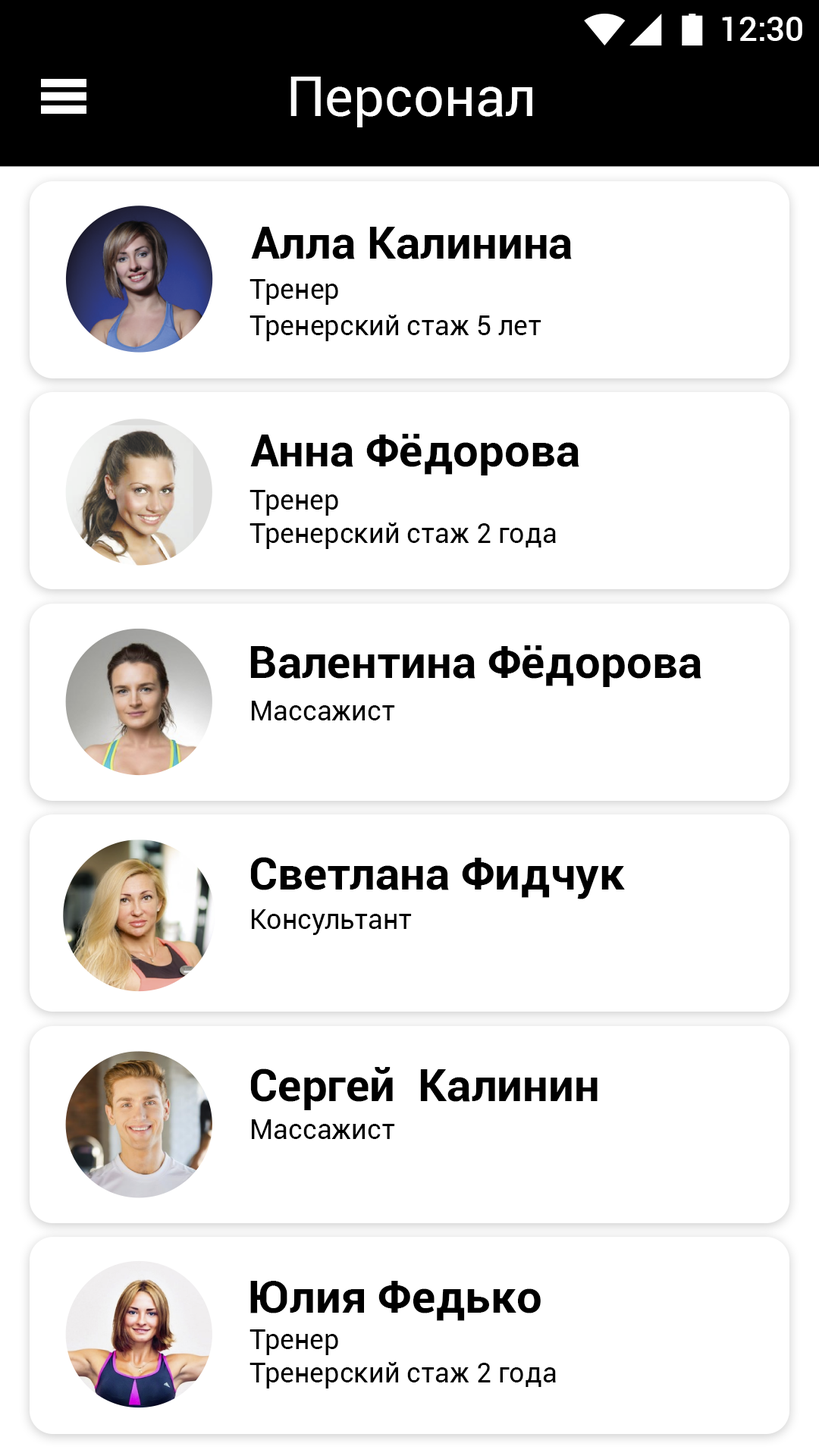
<style>
.page{position:relative;width:819px;height:1456px;background:#ffffff}
.page>*{position:absolute;margin:0}
.t1{font:33.4px "Roboto-Medium";color:#ffffff}
.t2{font:54.6px "Roboto-Regular";color:#ffffff}
.t3{font:45.5px "Roboto-Bold";color:#000000}
.t4{font:27.3px/36.4px "Roboto-Regular";color:#000000}
.t5{font:27.3px "Roboto-Regular";color:#000000}
</style>
<div class="page">
<p class="t1" style="left:722px;top:17px;width:80px;height:24px">12:30</p>
<p class="t2" style="left:290px;top:77px;width:242px;height:50px">Персонал</p>
<p class="t3" style="left:251px;top:227px;width:321px;height:32px">Алла Калинина</p>
<p class="t4" style="left:249px;top:279px;width:292px;height:62px">Тренер<br>Тренерский стаж 5 лет</p>
<p class="t3" style="left:250px;top:434px;width:329px;height:41px">Анна Фёдорова</p>
<p class="t5" style="left:249px;top:490px;width:307px;height:59px">Тренер<br>Тренерский стаж 2 года</p>
<p class="t3" style="left:250px;top:645px;width:451px;height:42px">Валентина Фёдорова</p>
<p class="t5" style="left:252px;top:701px;width:143px;height:19px">Массажист</p>
<p class="t3" style="left:250px;top:857px;width:375px;height:42px">Светлана Фидчук</p>
<p class="t5" style="left:252px;top:909px;width:160px;height:26px">Консультант</p>
<p class="t3" style="left:250px;top:1067px;width:348px;height:43px">Сергей  Калинин</p>
<p class="t5" style="left:252px;top:1119px;width:143px;height:20px">Массажист</p>
<p class="t3" style="left:250px;top:1281px;width:291px;height:40px">Юлия Федько</p>
<p class="t5" style="left:249px;top:1329px;width:307px;height:59px">Тренер<br>Тренерский стаж 2 года</p>
</div>
